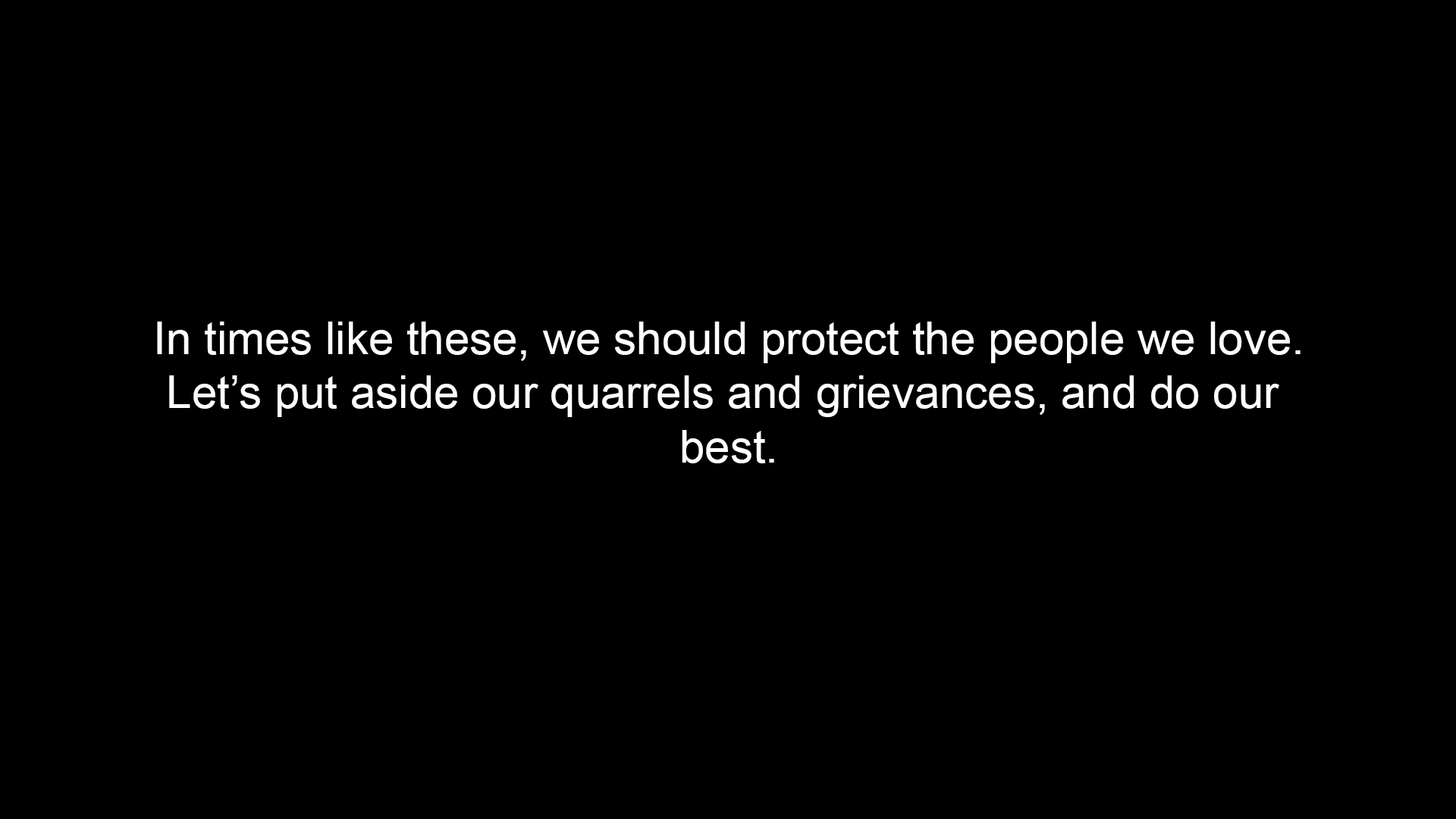
<style>
.page{position:relative;width:1456px;height:819px;background:#000000}
.page>*{position:absolute;margin:0}
.t1{font:45.5px/54.2px "ArialMT";color:#ffffff}
</style>
<div class="page">
<p class="t1" style="left:157px;top:322px;width:1144px;height:141px;text-align:center">In times like these, we should protect the people we love.<br>Let’s put aside our quarrels and grievances, and do our <br>best.</p>
</div>
